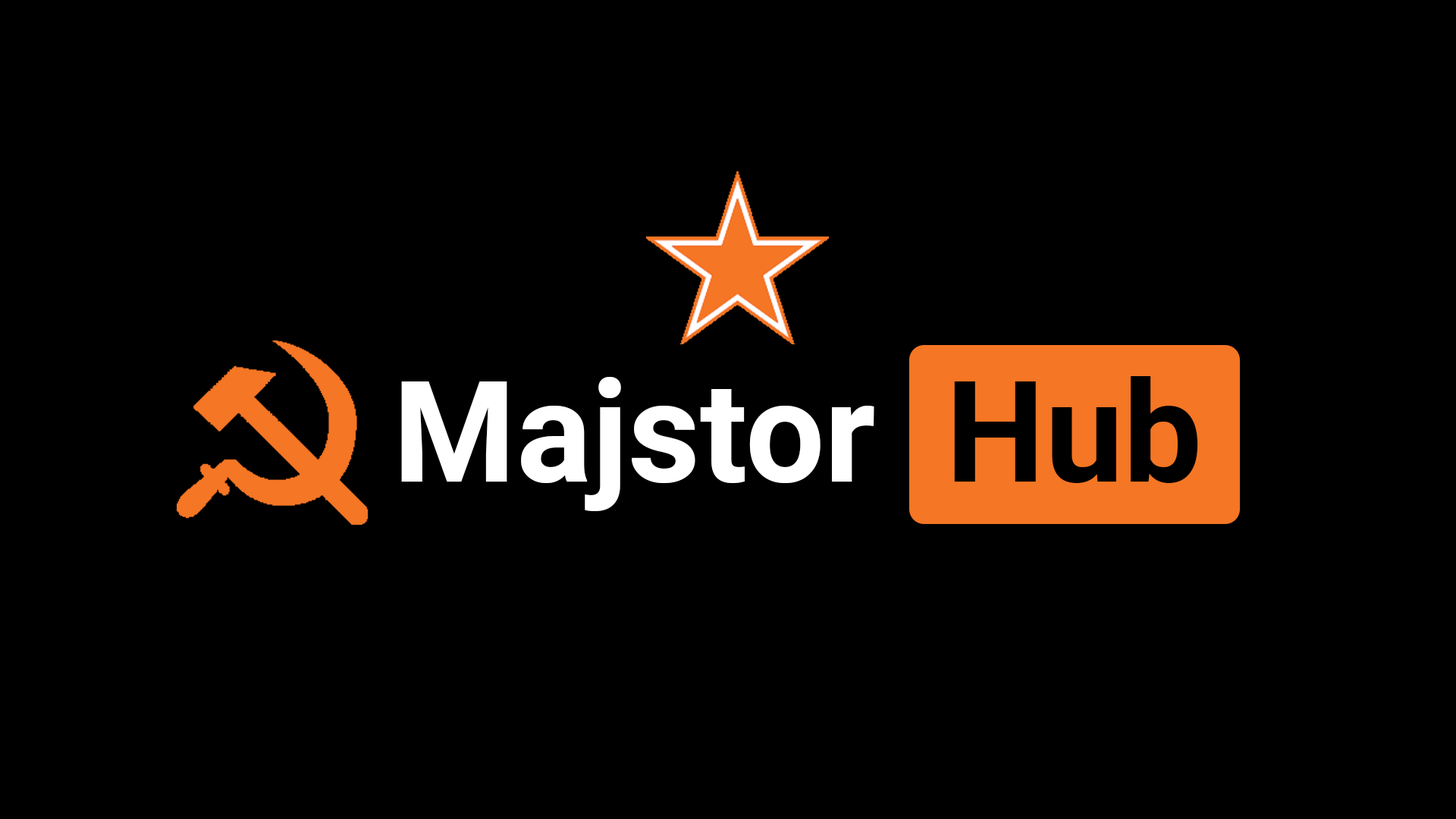
<style>
.page{position:relative;width:1456px;height:819px;background:#000000}
.page>*{position:absolute;margin:0}
.t1{font:140.3px "Roboto-Bold";color:#ffffff}
.t2{font:140.3px "Roboto-Bold";color:#000000}
</style>
<div class="page">
<p class="t1" style="left:401px;top:376px;width:797px;height:135px">Majstor<span class="t2">  Hub</span></p>
</div>
